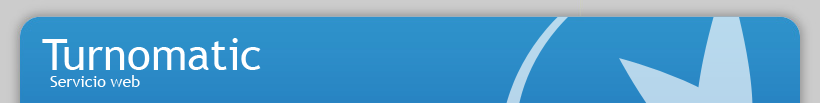
<style>
.page{position:relative;width:820px;height:103px}
.page>*{position:absolute;margin:0}
.t1{font:44px "TrebuchetMS";color:#ffffff}
.t2{font:15.9px "TrebuchetMS";color:#ffffff}
</style>
<div class="page">
<p class="t1" style="left:42px;top:38px;width:219px;height:32px">Turnomatic</p>
<p class="t2" style="left:50px;top:75px;width:90px;height:12px">Servicio web</p>
</div>
